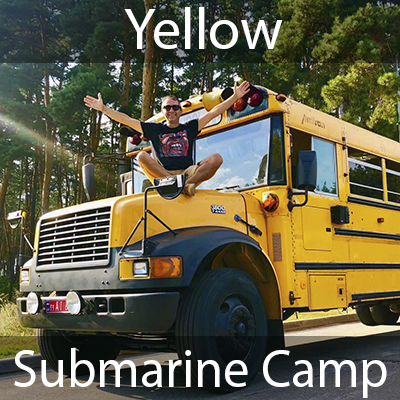
<style>
.page{position:relative;width:400px;height:400px}
.page>*{position:absolute;margin:0}
.t1{font:58.5px "MyriadPro-Regular";color:#ffffff}
.t2{font:53.9px "MyriadPro-Regular";color:#ffffff;scale:0.97 1}
</style>
<div class="page">
<p class="t1" style="left:124px;top:7px;width:159px;height:42px">Yellow</p>
<p class="t2" style="left:14px;top:348px;width:373px;height:50px">Submarine Camp</p>
</div>
